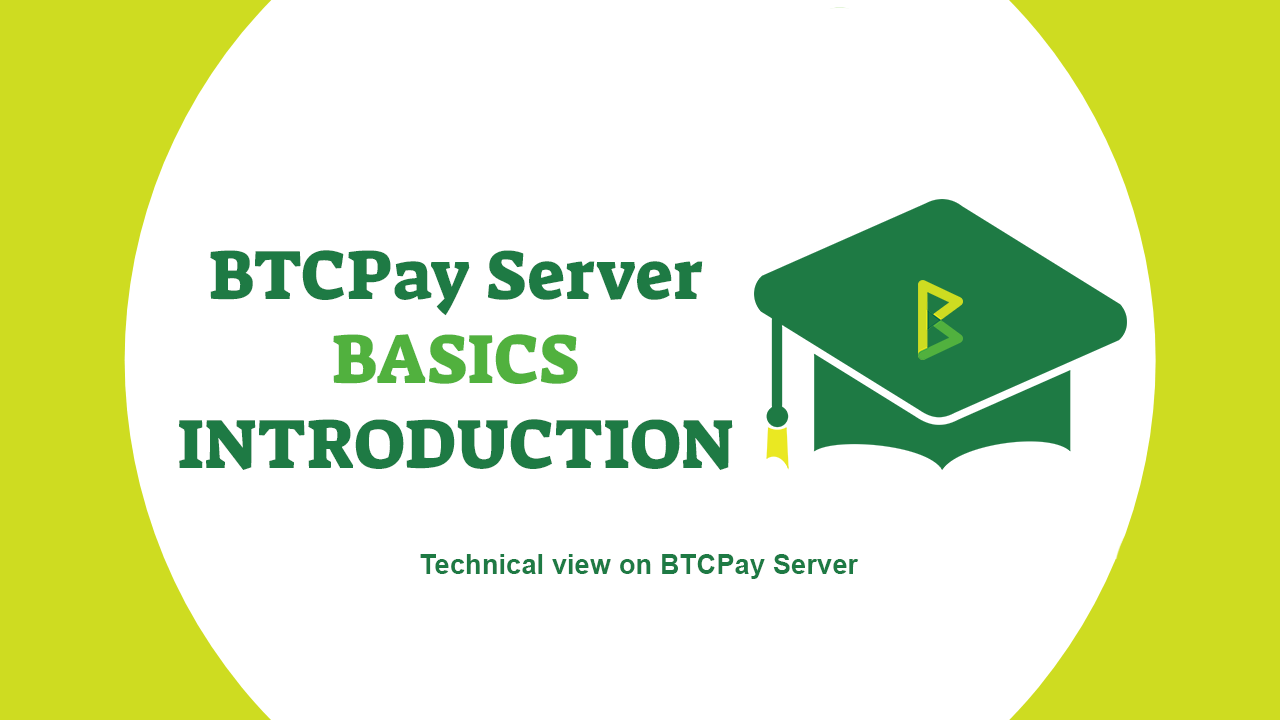
<style>
.page{position:relative;width:1280px;height:720px;background:#ffffff}
.page>*{position:absolute;margin:0}
.t1{font:70.8px "SuezOne-Regular";color:#1e7a44}
.t2{font:70.8px "SuezOne-Regular";color:#51b13e}
.t3{font:27.4px "Arial-BoldMT";color:#1e7a44}
</style>
<div class="page">
<p class="t1" style="left:179px;top:250px;width:554px;height:220px;text-align:center">BTCPay Server<br><span class="t2">BASICS<br></span>INTRODUCTION</p>
<p class="t3" style="left:420px;top:554px;width:439px;height:25px">Technical view on BTCPay Server</p>
</div>
